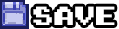
<style>
.page{position:relative;width:119px;height:29px;background:#ffffff}
.page>*{position:absolute;margin:0}
.t1{font:20.8px "Super-Mario-Bros.-2";color:#ffffff}
</style>
<div class="page">
<p class="t1" style="left:33px;top:6px;width:82px;height:19px">SAVE</p>
</div>
